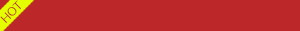
<style>
.page{position:relative;width:300px;height:31px;background:#bc2729}
.page>*{position:absolute;margin:0}
.t1{font:10px "FZZHJW--GB1-0"}
</style>
<div class="page">
<p class="t1" style="left:0px;top:0px;width:21px;height:23px;rotate:-45deg">HOT</p>
</div>
